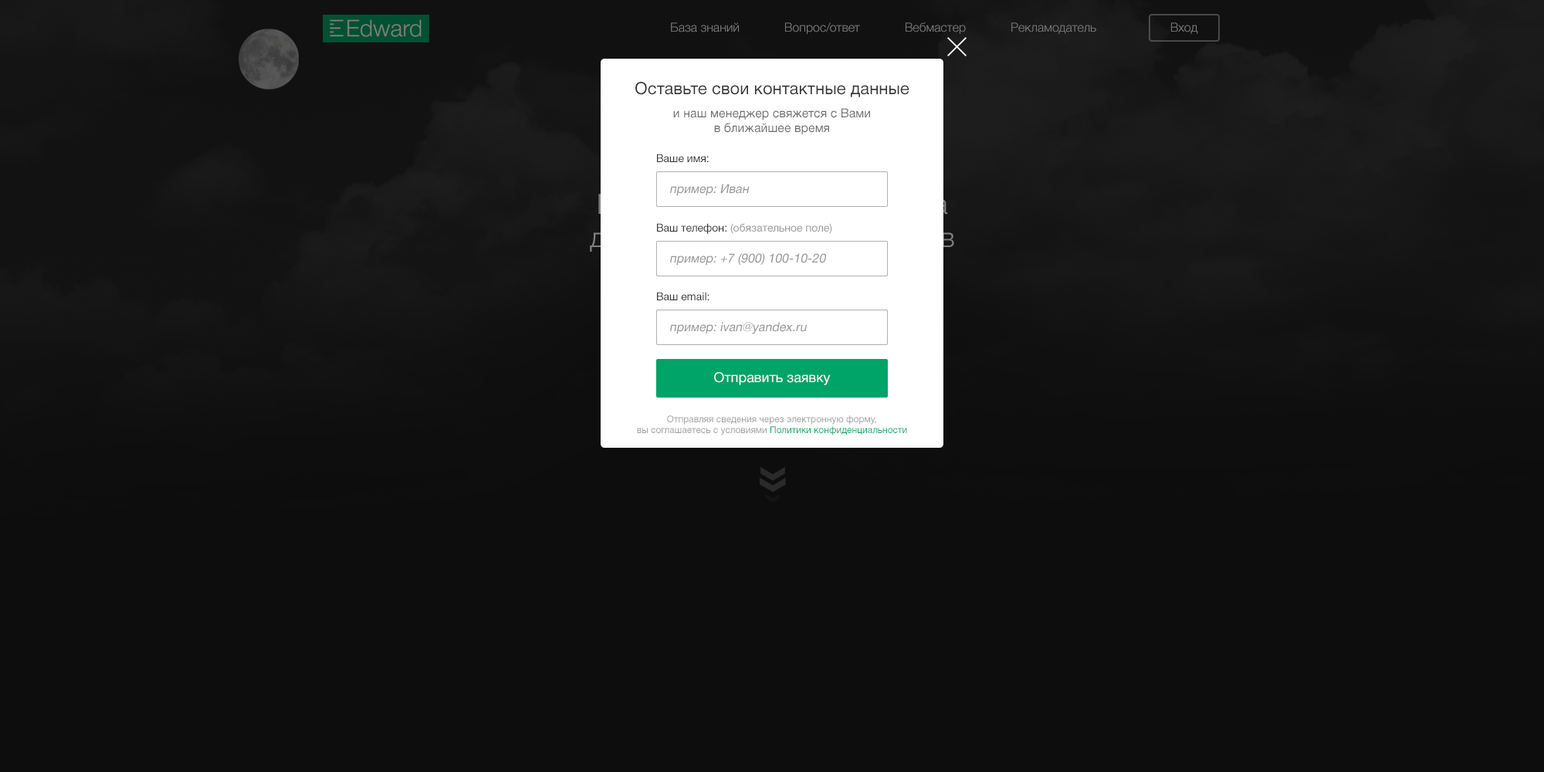
<style>
.page{position:relative;width:1544px;height:772px;background:#0d0d0d}
.page>*{position:absolute;margin:0}
.t1{font:17px "HelveticaNeueCyr-Roman";color:#333333}
.t2{font:12.4px "HelveticaNeueCyr-Roman";color:#6c6c6c}
.t3{font:10.8px "HelveticaNeueCyr-Roman";color:#333333}
.t4{font:12.4px "HelveticaNeueCyr-Roman";color:#959595;font-style:italic}
.t5{font:10.8px "HelveticaNeueCyr-Roman";color:#999999}
.t6{font:13.9px "HelveticaNeueCyr-Roman";color:#ffffff}
.t7{font:9.3px "HelveticaNeueCyr-Roman";color:#9f9f9f}
.t8{font:9.3px "HelveticaNeueCyr-Roman";color:#00a368}
</style>
<div class="page">
<p class="t1" style="left:635px;top:82px;width:275px;height:15px">Оставьте свои контактные данные</p>
<p class="t2" style="left:673px;top:108px;width:197px;height:27px;text-align:center">и наш менеджер свяжется с Вами <br>в ближайшее время</p>
<p class="t3" style="left:657px;top:154px;width:52px;height:8px">Ваше имя:</p>
<p class="t4" style="left:670px;top:184px;width:80px;height:12px">пример: Иван</p>
<p class="t5" style="left:657px;top:223px;width:175px;height:11px"><span class="t3">Ваш телефон: </span>(обязательное поле)</p>
<p class="t4" style="left:670px;top:253px;width:156px;height:13px">пример: +7 (900) 100-10-20</p>
<p class="t3" style="left:657px;top:292px;width:53px;height:8px">Ваш email:</p>
<p class="t4" style="left:670px;top:322px;width:137px;height:12px">пример: ivan@yandex.ru</p>
<p class="t6" style="left:714px;top:372px;width:117px;height:13px">Отправить заявку</p>
<p class="t7" style="left:637px;top:415px;width:270px;height:20px;text-align:center">Отправляя сведения через электронную форму, <br>вы соглашаетесь с условиями <span class="t8">Политики конфиденциальности</span></p>
</div>
